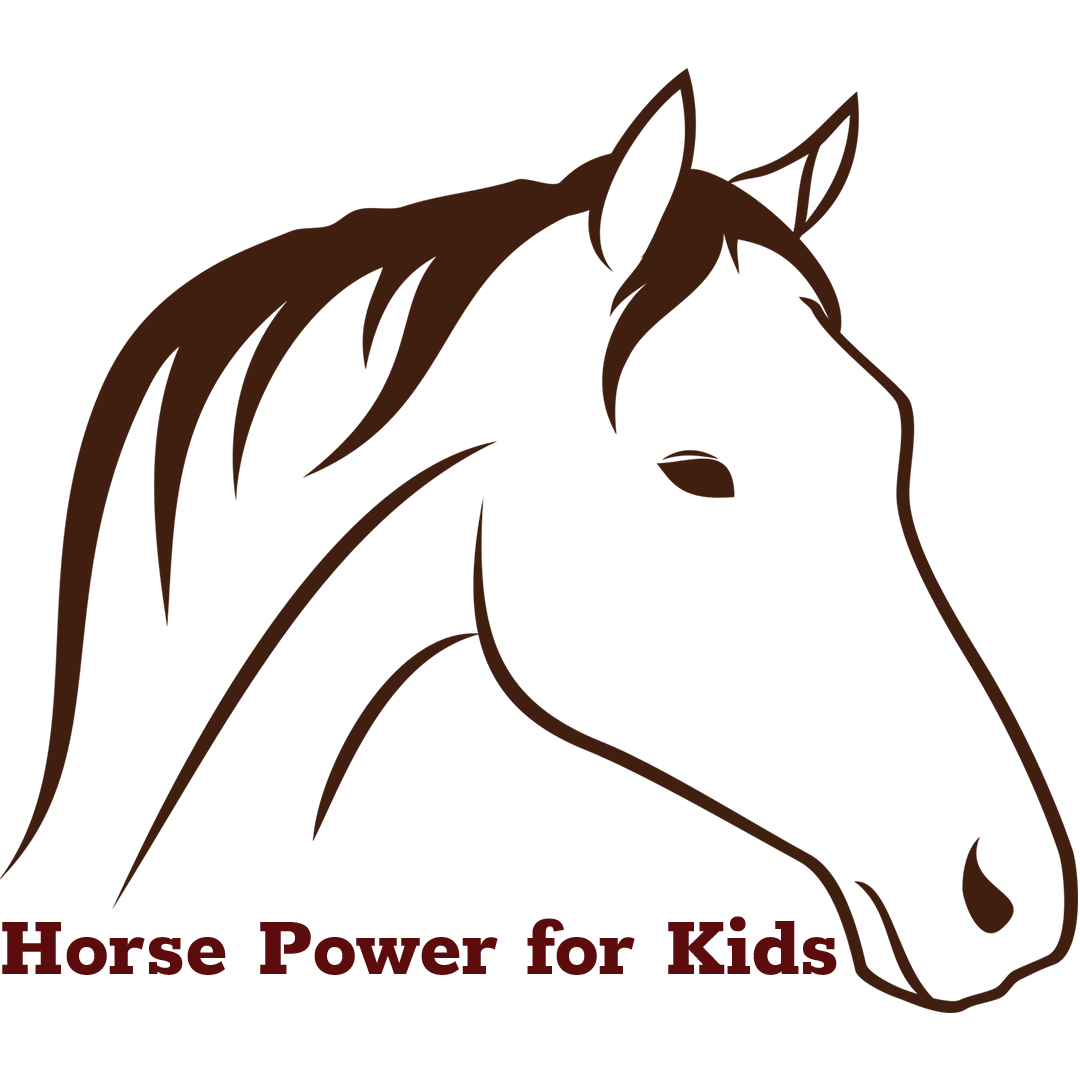
<style>
.page{position:relative;width:1080px;height:1080px;background:#ffffff}
.page>*{position:absolute;margin:0}
.t1{font:90px "Rokkitt-ExtraBold";color:#5c0c0d}
</style>
<div class="page">
<p class="t1" style="left:2px;top:916px;width:835px;height:59px">Horse Power for Kids</p>
</div>
